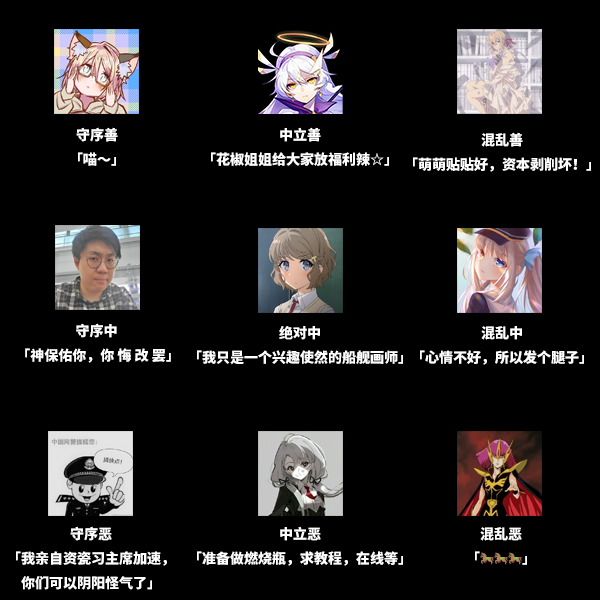
<style>
.page{position:relative;width:600px;height:600px;background:#000000}
.page>*{position:absolute;margin:0}
.t1{font:14px "NotoSansCJKsc-Black";color:#ffffff}
.t2{font:14px "NotoSansCJKsc-Black"}
.t3{font:14px "EmojiOneColor"}
</style>
<div class="page">
<p class="t1" style="left:76px;top:127px;width:42px;height:39px;text-align:center">守序善<br>「喵～」</p>
<p class="t1" style="left:211px;top:127px;width:178px;height:40px;text-align:center">中立善<br>「花椒姐姐给大家放福利辣☆」</p>
<p class="t1" style="left:413px;top:132px;width:178px;height:40px;text-align:center">混乱善<br>「萌萌贴贴好，资本剥削坏！」</p>
<p class="t1" style="left:25px;top:323px;width:146px;height:40px;text-align:center">守序中 <br>「神保佑你，你 悔 改 罢」</p>
<p class="t1" style="left:197px;top:326px;width:206px;height:39px;text-align:center">绝对中<br>「我只是一个兴趣使然的船舰画师」</p>
<p class="t1" style="left:420px;top:326px;width:164px;height:39px;text-align:center">混乱中<br>「心情不好，所以发个腿子」</p>
<p class="t1" style="left:16px;top:526px;width:151px;height:64px;text-align:center">守序恶<br>「我亲自资瓷习主席加速，<br>你们可以阴阳怪气了」</p>
<p class="t1" style="left:197px;top:526px;width:206px;height:40px;text-align:center">中立恶<br>「准备做燃烧瓶，求教程，在线等」</p>
<p class="t2" style="left:475px;top:527px;width:52px;height:38px;text-align:center">混乱恶<br>「<span class="t3">🐎🐎🐎</span>」</p>
</div>
